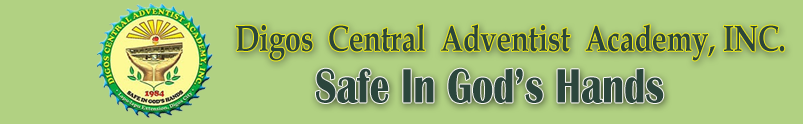
<style>
.page{position:relative;width:803px;height:124px;background:#b1d182}
.page>*{position:absolute;margin:0}
.t1{font:36.5px "BookAntiqua-Bold";color:#2b463c;scale:0.79 1}
.t2{font:49.8px "BritannicBold";color:#2b463c;scale:0.79 1}
</style>
<div class="page">
<p class="t1" style="left:236px;top:24px;width:549px;height:37px">Digos  Central  Adventist  Academy, INC.</p>
<p class="t2" style="left:316px;top:68px;width:348px;height:35px">Safe In God’s Hands</p>
</div>
